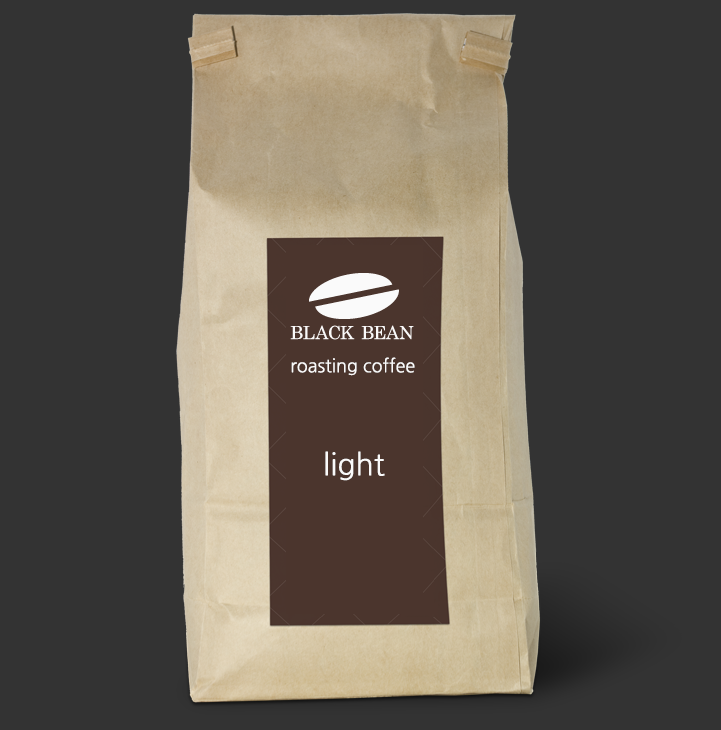
<style>
.page{position:relative;width:721px;height:730px;background:#333333}
.page>*{position:absolute;margin:0}
.t1{font:18px "NanumGothic";color:#fafafa}
.t2{font:30px "NanumGothic";color:#fafafa}
</style>
<div class="page">
<p class="t1" style="left:291px;top:357px;width:124px;height:19px">roasting coffee</p>
<p class="t2" style="left:325px;top:451px;width:60px;height:30px">light</p>
</div>
